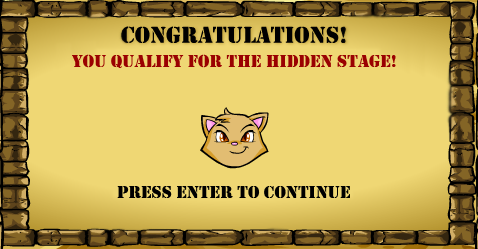
<style>
.page{position:relative;width:478px;height:249px;background:#efd774}
.page>*{position:absolute;margin:0}
.t1{font:18px "Stencil";color:#9a0101}
.t2{font:18px "Stencil";color:#000000}
</style>
<div class="page">
<p class="t1" style="left:72px;top:54px;width:324px;height:14px">YOU QUALIFY FOR THE HIDDEN STAGE!</p>
<p class="t2" style="left:117px;top:186px;width:233px;height:12px">PRESS Enter TO CONTINUE</p>
</div>
